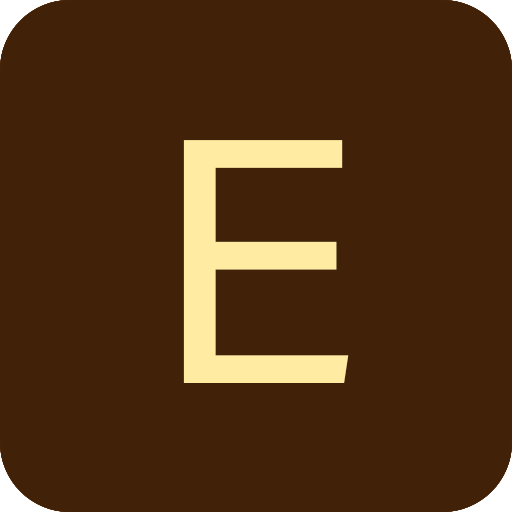
<style>
.page{position:relative;width:512px;height:512px;background:#412209}
.page>*{position:absolute;margin:0}
.t1{font:349px "AcuminConcept-Regular";color:#ffeba1}
</style>
<div class="page">
<p class="t1" style="left:183px;top:140px;width:166px;height:243px">E</p>
</div>
